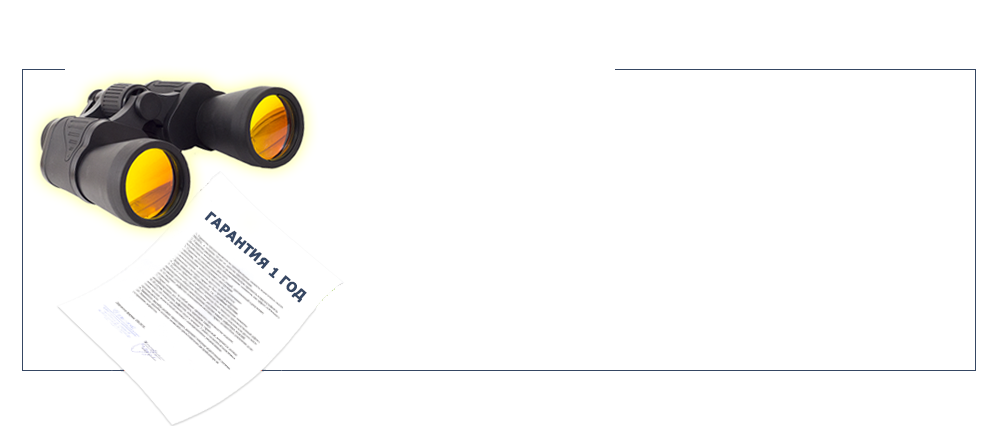
<style>
.page{position:relative;width:1000px;height:426px;background:#ffffff}
.page>*{position:absolute;margin:0}
.t1{font:13.5px "Verdana-Bold";letter-spacing:0.005em;color:#364763;font-weight:bold;scale:0.93 1}
</style>
<div class="page">
<p class="t1" style="left:204px;top:211px;width:103px;height:92px;rotate:41deg">ГАРАНТИЯ 1 ГОД</p>
</div>
